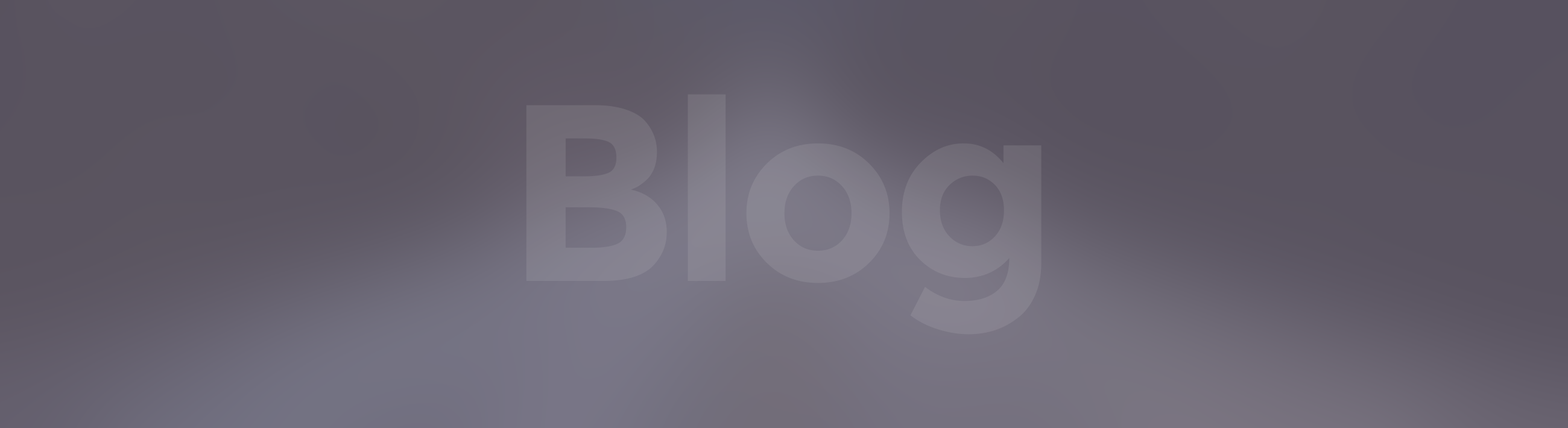
<style>
.page{position:relative;width:1568px;height:428px}
.page>*{position:absolute;margin:0}
.t1{font:251.3px "Montserrat-Bold";letter-spacing:-0.03em;color:#817e8a}
</style>
<div class="page">
<p class="t1" style="left:526px;top:94px;width:516px;height:241px">Blog</p>
</div>
